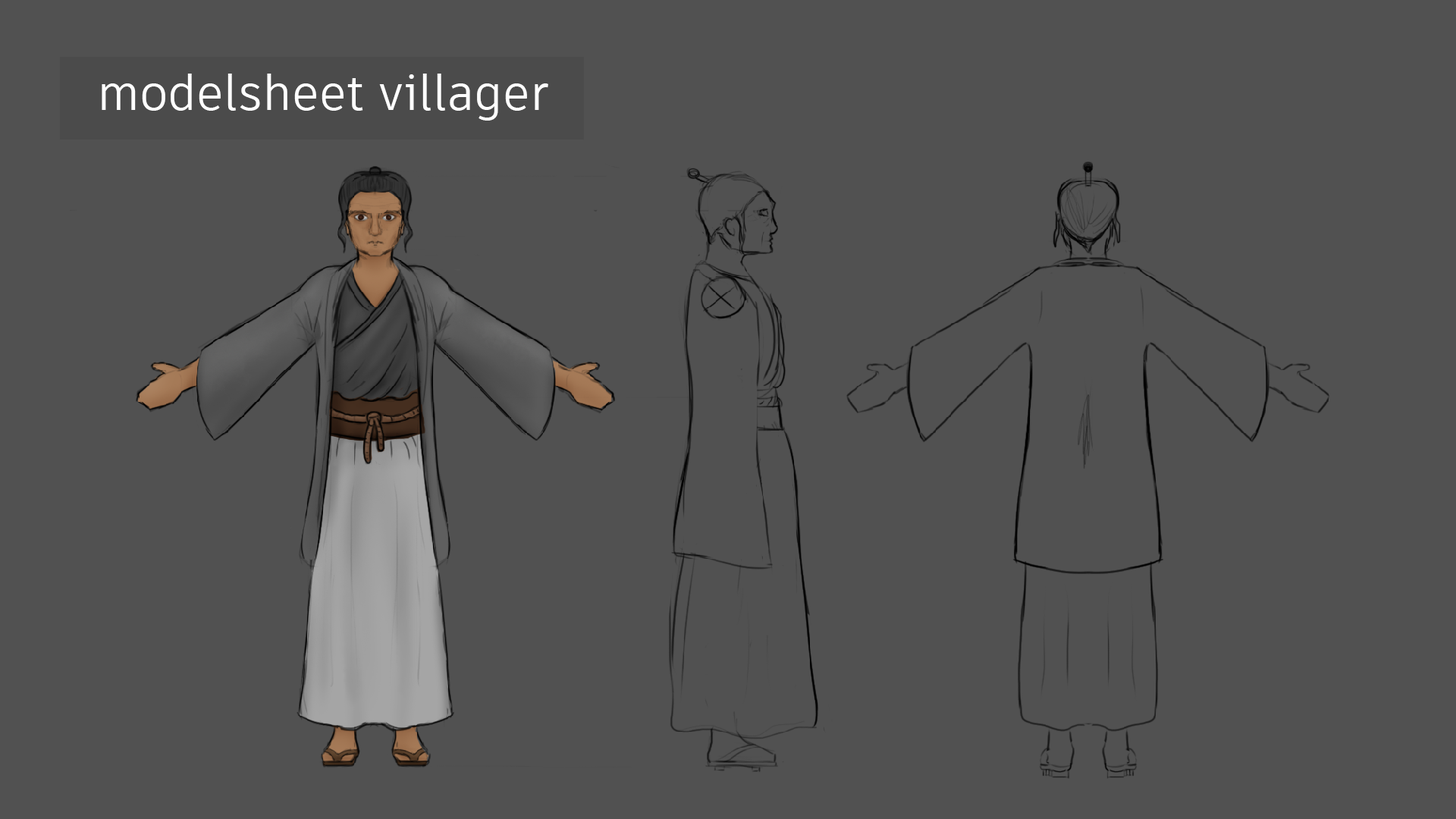
<style>
.page{position:relative;width:1456px;height:819px;background:#515151}
.page>*{position:absolute;margin:0}
.t1{font:48.4px "ArtifaktElement-Regular";color:#ffffff}
</style>
<div class="page">
<p class="t1" style="left:102px;top:74px;width:446px;height:47px">modelsheet villager</p>
</div>
